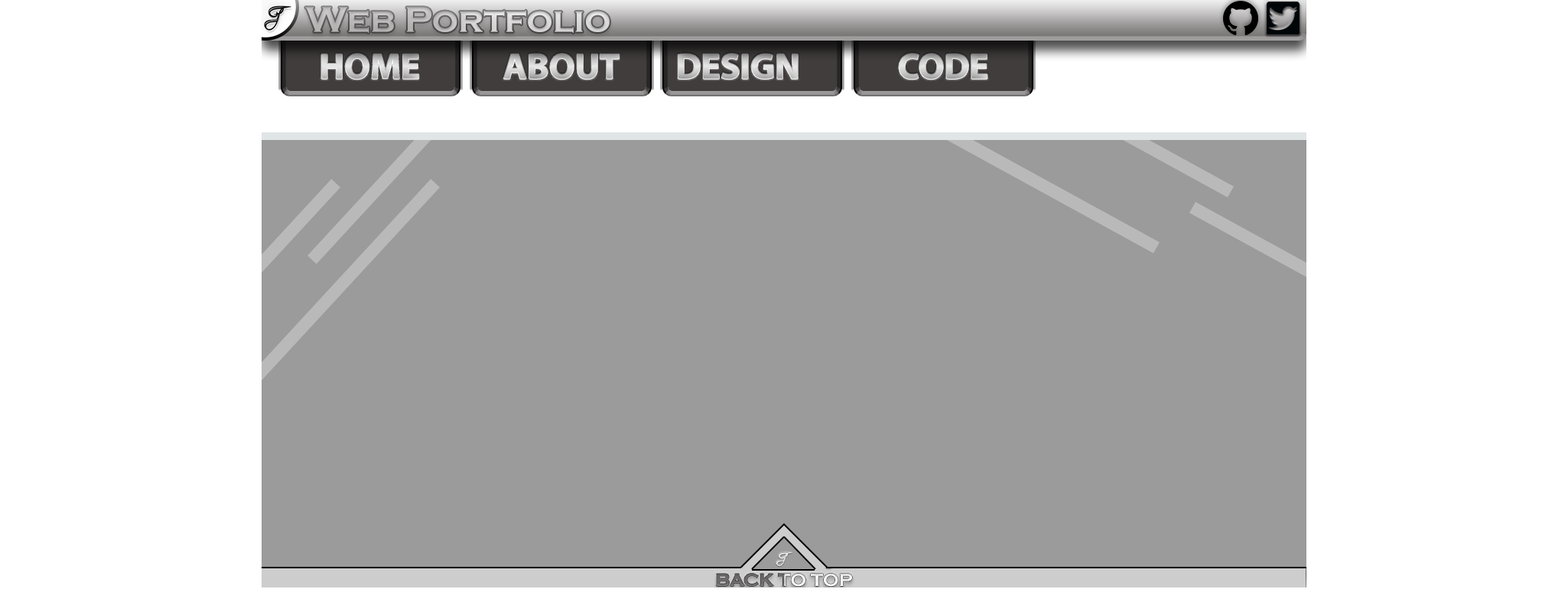
<style>
.page{position:relative;width:1568px;height:615px;background:#9c9b9b}
.page>*{position:absolute;margin:0}
.t1{font:36.7px "CopperplateGothic-Bold";color:#c6c4c5}
.t2{font:36.2px "MyriadPro-Bold"}
</style>
<div class="page">
<p class="t1" style="left:305px;top:7px;width:305px;height:26px">Web Portfolio</p>
<p class="t2" style="left:321px;top:54px;width:98px;height:26px">HOME</p>
<p class="t2" style="left:503px;top:54px;width:117px;height:26px">ABOUT</p>
<p class="t2" style="left:678px;top:54px;width:120px;height:26px">DESIGN</p>
<p class="t2" style="left:899px;top:54px;width:88px;height:26px">CODE</p>
</div>
